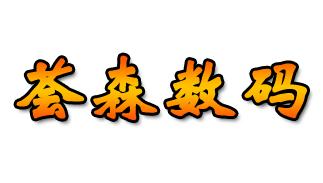
<style>
.page{position:relative;width:323px;height:183px;background:#ffffff}
.page>*{position:absolute;margin:0}
.t1{font:72px "STXinwei";letter-spacing:0.02em;font-weight:bold}
</style>
<div class="page">
<p class="t1" style="left:16px;top:55px;width:291px;height:65px">荟森数码</p>
</div>
